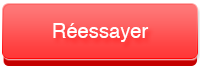
<style>
.page{position:relative;width:200px;height:68px}
.page>*{position:absolute;margin:0}
.t1{font:20.3px "Helvetica";color:#ffffff}
</style>
<div class="page">
<p class="t1" style="left:53px;top:23px;width:96px;height:19px">Réessayer</p>
</div>
